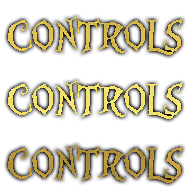
<style>
.page{position:relative;width:192px;height:192px;background:#ffffff}
.page>*{position:absolute;margin:0}
.t1{font:46px "AliceinWonderland";color:#dfc14d}
.t2{font:46px "AliceinWonderland";color:#f4e46a}
.t3{font:46px "AliceinWonderland";color:#b89639}
</style>
<div class="page">
<p class="t1" style="left:8px;top:17px;width:174px;height:38px">CONTROLS</p>
<p class="t2" style="left:8px;top:81px;width:174px;height:38px">CONTROLS</p>
<p class="t3" style="left:8px;top:145px;width:174px;height:38px">CONTROLS</p>
</div>
